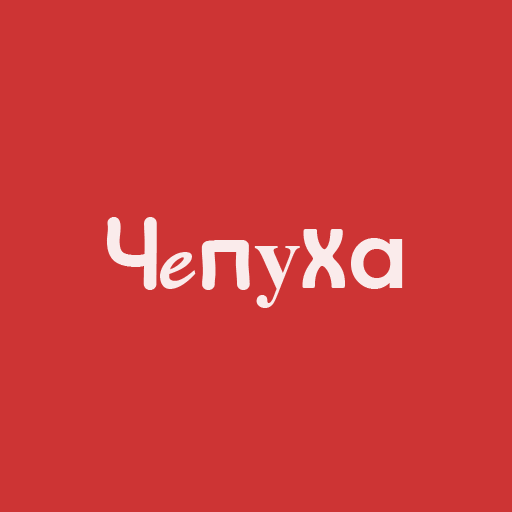
<style>
.page{position:relative;width:512px;height:512px;background:#cd3434}
.page>*{position:absolute;margin:0}
.t1{font:92.6px "ComicSansMS-Bold";color:#ffffff}
.t2{font:92.6px "BrushScriptStd";color:#ffffff}
.t3{font:92.6px "TimesNewRomanPS-BoldMT";color:#ffffff}
.t4{font:92.6px "HoboStd";color:#ffffff}
.t5{font:92.6px "CenturyGothic-Bold";color:#ffffff}
</style>
<div class="page">
<p class="t1" style="left:106px;top:217px;width:297px;height:91px;opacity:0.9">Ч<span class="t2">e</span>п<span class="t3">у</span><span class="t4">x</span><span class="t5">а</span></p>
</div>
